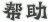
<style>
.page{position:relative;width:48px;height:22px}
.page>*{position:absolute;margin:0}
.t1{font:24.3px "GraveBustedStoneLishuSCRoughlyC";color:#3f4542;scale:0.97 1}
</style>
<div class="page">
<p class="t1" style="left:2px;top:2px;width:45px;height:19px;rotate:-1deg">帮助</p>
</div>
